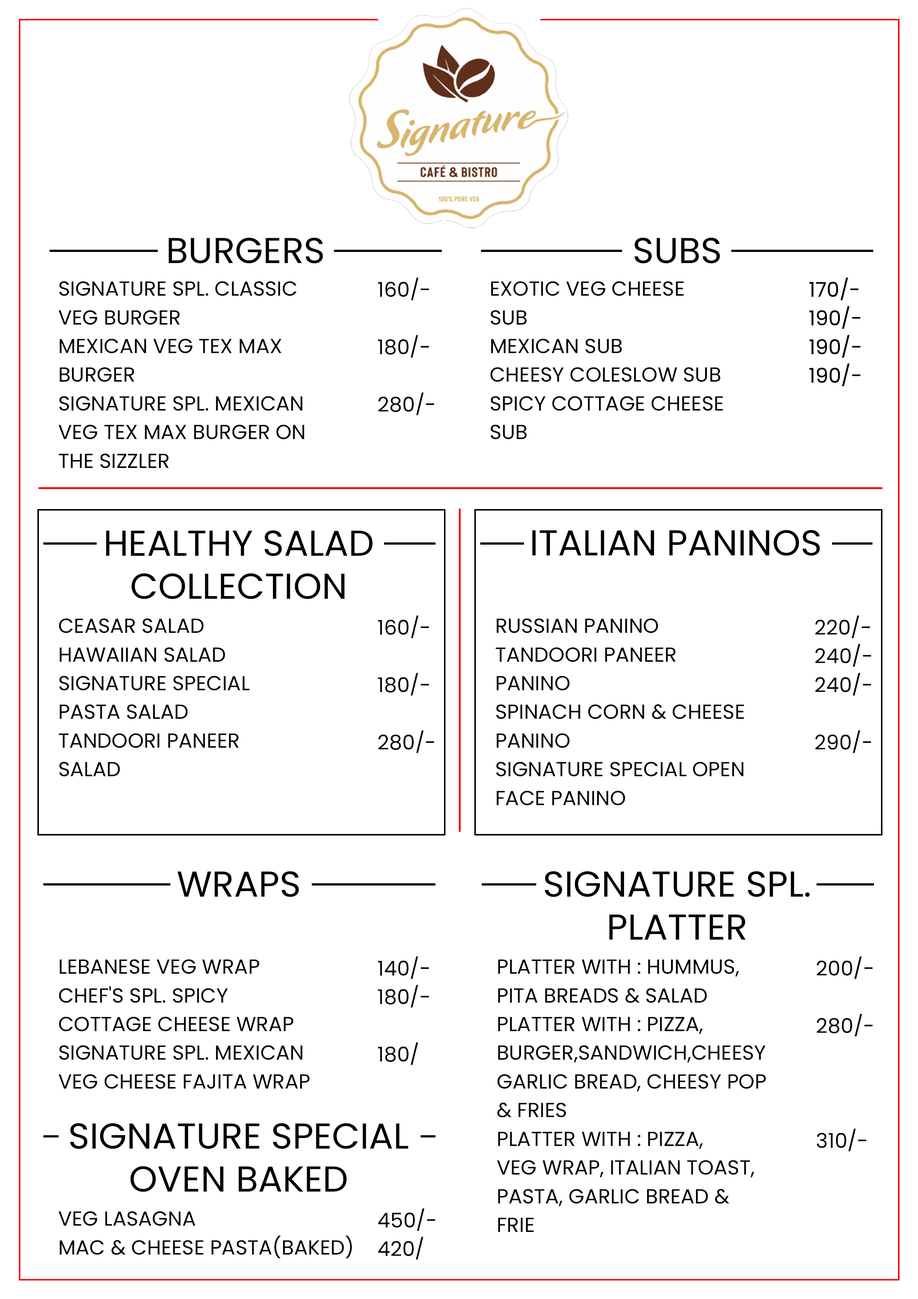
<style>
.page{position:relative;width:918px;height:1299px;background:#ffffff}
.page>*{position:absolute;margin:0}
.t1{font:35.9px "Poppins-Regular";color:#000000;text-transform:uppercase}
.t2{font:20.4px/28.7px "Poppins-Regular";color:#000000}
</style>
<div class="page">
<p class="t1" style="left:169px;top:237px;width:154px;height:26px">BURGERS</p>
<p class="t1" style="left:634px;top:237px;width:86px;height:26px">SUBS</p>
<p class="t2" style="left:59px;top:281px;width:245px;height:187px">SIGNATURE SPL. CLASSIC<br>VEG BURGER<br>MEXICAN VEG TEX MAX<br>BURGER<br>SIGNATURE SPL. MEXICAN<br>VEG TEX MAX BURGER ON<br>THE SIZZLER</p>
<p class="t2" style="left:378px;top:277px;width:56px;height:138px">160/-<br><br>180/-<br><br>280/-</p>
<p class="t2" style="left:490px;top:281px;width:233px;height:158px">EXOTIC VEG CHEESE<br>SUB<br>MEXICAN SUB<br>CHEESY COLESLOW SUB<br>SPICY COTTAGE CHEESE<br>SUB</p>
<p class="t2" style="left:810px;top:277px;width:51px;height:109px">170/-<br>190/-<br>190/-<br>190/-</p>
<p class="t2" style="left:810px;top:277px;width:51px;height:109px">170/-<br>190/-<br>190/-<br>190/-</p>
<p class="t1" style="left:106px;top:530px;width:267px;height:69px;text-align:center">HEALTHY SALAD<br>COLLECTION</p>
<p class="t1" style="left:532px;top:530px;width:288px;height:26px">ITALIAN PANINOS</p>
<p class="t2" style="left:378px;top:615px;width:56px;height:138px">160/-<br><br>180/-<br><br>280/-</p>
<p class="t2" style="left:815px;top:615px;width:57px;height:138px">220/-<br>240/-<br>240/-<br><br>290/-</p>
<p class="t2" style="left:59px;top:618px;width:191px;height:158px">CEASAR SALAD<br>HAWAIIAN SALAD<br>SIGNATURE SPECIAL<br>PASTA SALAD<br>TANDOORI PANEER<br>SALAD</p>
<p class="t2" style="left:496px;top:618px;width:248px;height:187px">RUSSIAN PANINO<br>TANDOORI PANEER<br>PANINO<br>SPINACH CORN &amp; CHEESE<br>PANINO<br>SIGNATURE SPECIAL OPEN<br>FACE PANINO</p>
<p class="t1" style="left:177px;top:871px;width:122px;height:26px">WRAPS</p>
<p class="t1" style="left:545px;top:871px;width:265px;height:68px;text-align:center">SIGNATURE SPL.<br>PLATTER</p>
<p class="t2" style="left:59px;top:959px;width:251px;height:130px">LEBANESE VEG WRAP<br>CHEF'S SPL. SPICY<br>COTTAGE CHEESE WRAP<br>SIGNATURE SPL. MEXICAN<br>VEG CHEESE FAJITA WRAP</p>
<p class="t2" style="left:378px;top:956px;width:51px;height:109px">140/-<br>180/-<br><br>180/</p>
<p class="t2" style="left:497px;top:959px;width:269px;height:273px">PLATTER WITH : HUMMUS,<br>PITA BREADS &amp; SALAD<br>PLATTER WITH : PIZZA,<br>BURGER,SANDWICH,CHEESY<br>GARLIC BREAD, CHEESY POP<br>&amp; FRIES<br>PLATTER WITH : PIZZA,<br>VEG WRAP, ITALIAN TOAST,<br>PASTA, GARLIC BREAD &amp;<br>FRIE</p>
<p class="t2" style="left:817px;top:956px;width:56px;height:195px">200/-<br><br>280/-<br><br><br><br>310/-</p>
<p class="t1" style="left:70px;top:1123px;width:339px;height:69px;text-align:center">SIGNATURE SPECIAL<br>OVEN BAKED</p>
<p class="t2" style="left:59px;top:1211px;width:293px;height:47px">VEG LASAGNA<br>MAC &amp; CHEESE PASTA(BAKED)</p>
<p class="t2" style="left:378px;top:1208px;width:58px;height:51px">450/-<br>420/</p>
</div>
